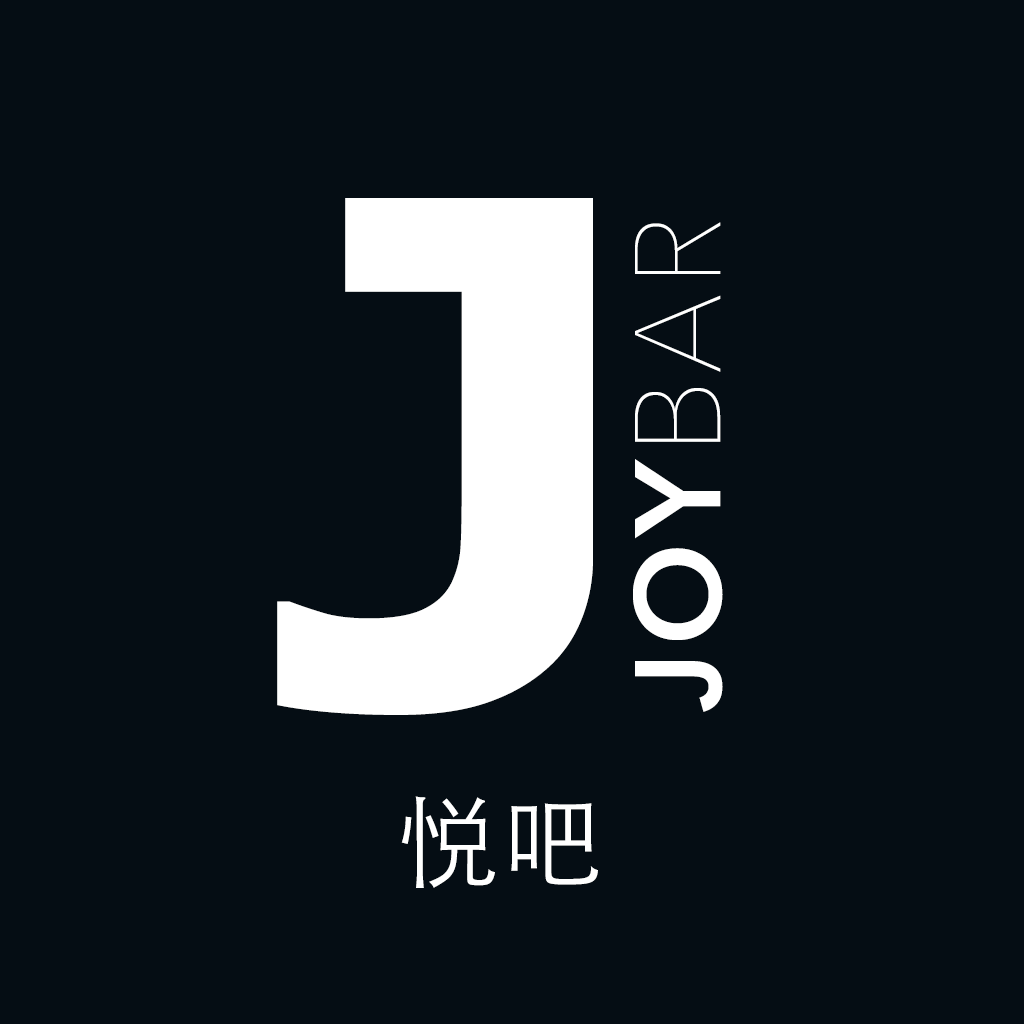
<style>
.page{position:relative;width:1024px;height:1024px;background:#050d14}
.page>*{position:absolute;margin:0}
.t1{font:700px "Verdana-Bold";letter-spacing:0.06em;color:#ffffff}
.t2{font:119.9px "AvenirNext-DemiBold";letter-spacing:0.06em;color:#ffffff}
.t3{font:119.9px "AvenirNext-UltraLight";letter-spacing:0.06em;color:#ffffff}
.t4{font:100px "STHeitiSC-Light";letter-spacing:0.06em;color:#ffffff}
</style>
<div class="page">
<p class="t1" style="left:277px;top:198px;width:316px;height:517px">J</p>
<p class="t2" style="left:633px;top:222px;width:90px;height:490px;rotate:-90deg">JOY<span class="t3">BAR</span></p>
<p class="t4" style="left:401px;top:796px;width:197px;height:92px">悦吧</p>
</div>
